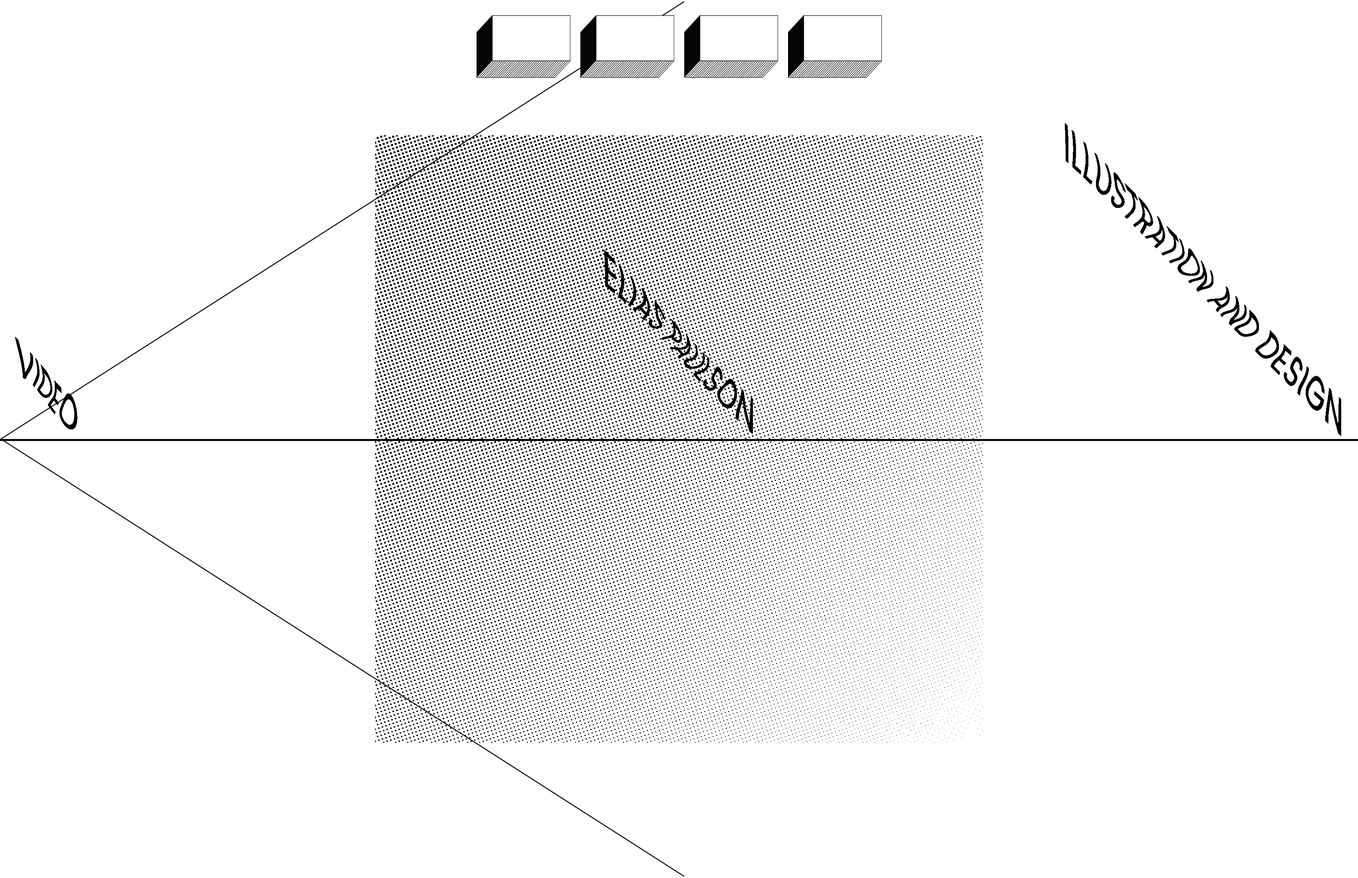
<style>
.page{position:relative;width:1358px;height:878px;background:#ffffff}
.page>*{position:absolute;margin:0}
.t1{font:54.3px "Poppins-Regular";letter-spacing:0.025em;color:#000000;scale:0.55 1}
.t2{font:52.2px "Poppins-Regular";letter-spacing:0.025em;color:#000000;scale:0.55 1}
</style>
<div class="page">
<p class="t1" style="left:1064px;top:123px;width:277px;height:313px;rotate:45deg">ILLUSTRATION AND DESIGN</p>
<p class="t2" style="left:604px;top:250px;width:149px;height:184px;rotate:45deg">ELIAS PAULSON</p>
<p class="t1" style="left:15px;top:337px;width:62px;height:93px;rotate:45deg">VIDEO</p>
</div>
